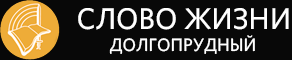
<style>
.page{position:relative;width:292px;height:60px;background:#080808}
.page>*{position:absolute;margin:0}
.t1{font:30px "Whitney-Medium";color:#ffffff;text-transform:uppercase}
.t2{font:18px "Whitney-Medium";color:#ffffff;text-transform:uppercase}
</style>
<div class="page">
<p class="t1" style="left:78px;top:8px;width:211px;height:22px">СЛОВО ЖИЗНИ</p>
<p class="t2" style="left:109px;top:35px;width:146px;height:19px">ДОЛГОПРУДНЫЙ</p>
</div>
